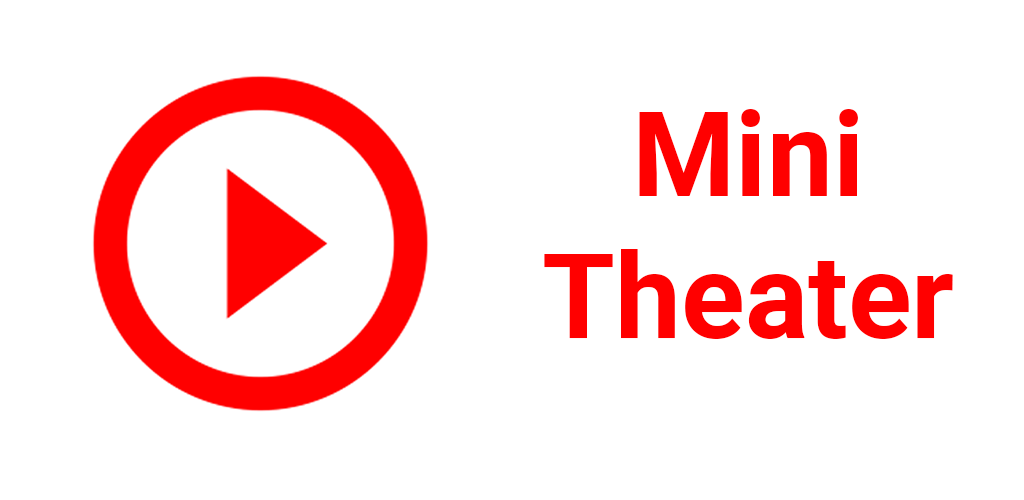
<style>
.page{position:relative;width:1024px;height:500px;background:#ffffff}
.page>*{position:absolute;margin:0}
.t1{font:118px "Roboto-Bold";color:#ff0000}
</style>
<div class="page">
<p class="t1" style="left:544px;top:109px;width:409px;height:230px;text-align:center">Mini<br>Theater</p>
</div>
